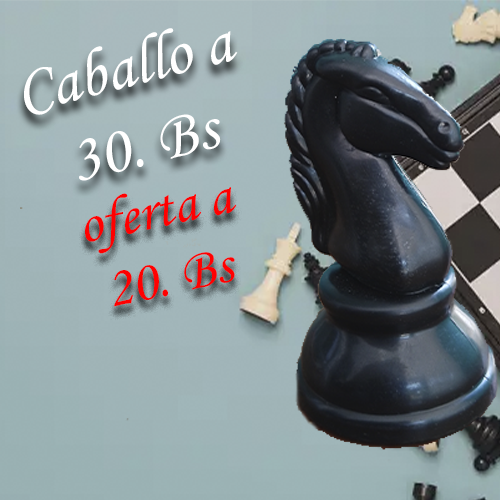
<style>
.page{position:relative;width:500px;height:500px}
.page>*{position:absolute;margin:0}
.t1{font:67px "MonotypeCorsiva";color:#ffffff}
.t2{font:56.9px "MonotypeCorsiva";color:#ff0000}
</style>
<div class="page">
<p class="t1" style="left:24px;top:28px;width:214px;height:153px;text-align:center;rotate:-14deg">Caballo a<br>30. Bs<br> <br>30</p>
<p class="t2" style="left:85px;top:187px;width:152px;height:120px;text-align:center;rotate:-12deg">oferta a<br>20. Bs</p>
</div>
